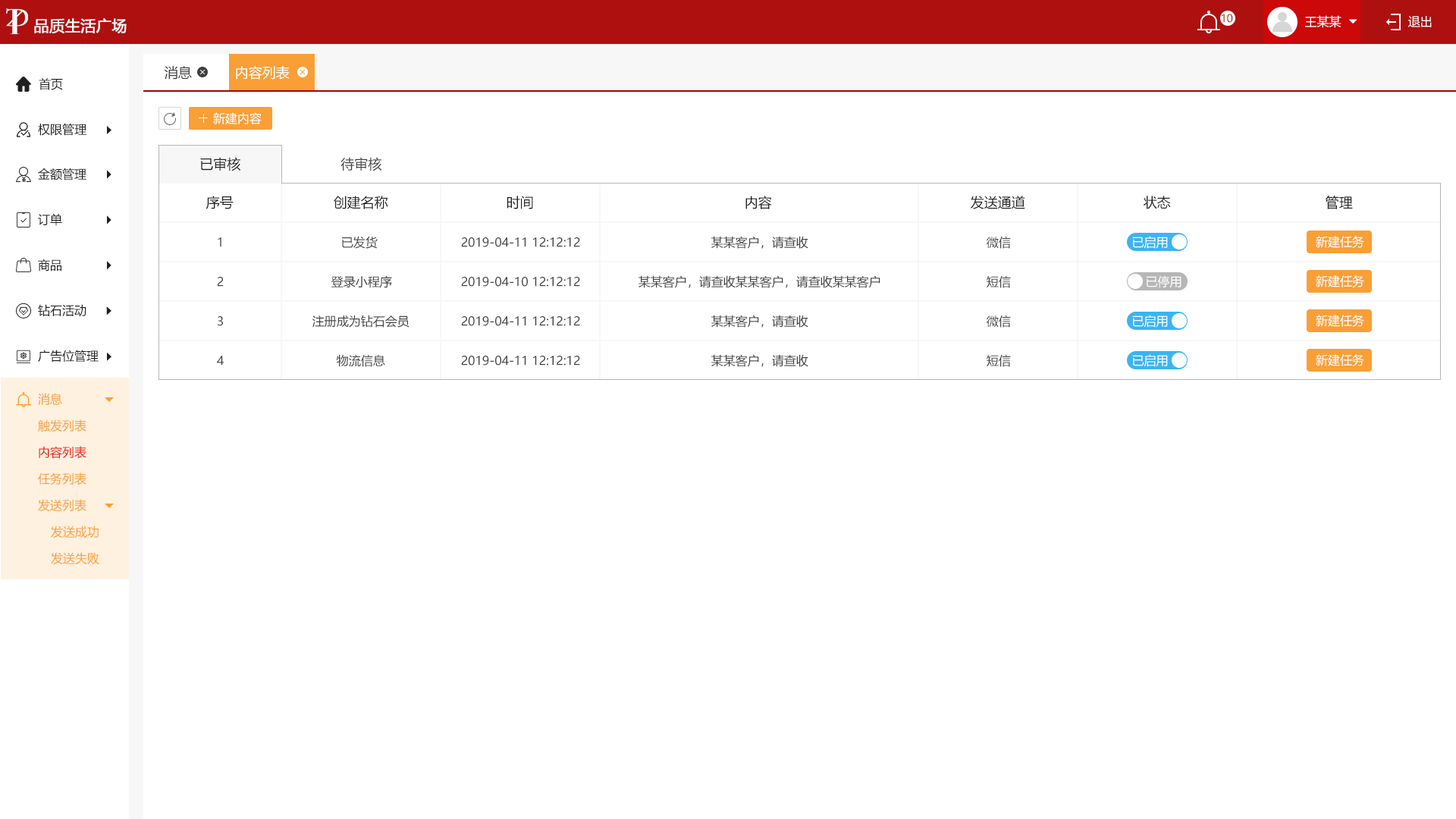
<style>
.page{position:relative;width:1456px;height:819px;background:#ffffff}
.page>*{position:absolute;margin:0}
.t1{font:10.6px "MicrosoftYaHei";color:#9c0606;text-transform:uppercase}
.t2{font:12.1px "MicrosoftYaHei";color:#ffffff;text-transform:uppercase}
.t3{font:15.2px "MicrosoftYaHei";color:#ffffff;text-transform:uppercase;font-weight:bold}
.t4{font:13.6px "MicrosoftYaHei";color:#404040;text-transform:uppercase}
.t5{font:13.6px "MicrosoftYaHei";color:#ffffff;text-transform:uppercase}
.t6{font:12.1px "MicrosoftYaHei";color:#202020;text-transform:uppercase}
.t7{font:13.6px "MicrosoftYaHei";color:#202020;text-transform:uppercase}
.t8{font:12.1px "MicrosoftYaHei";color:#404040;text-transform:uppercase}
.t9{font:12.1px "MicrosoftYaHei";color:#f99f36;text-transform:uppercase}
.t10{font:12.1px "MicrosoftYaHei";color:#e61f18;text-transform:uppercase}
</style>
<div class="page">
<p class="t1" style="left:1222px;top:14px;width:11px;height:9px">10</p>
<p class="t2" style="left:1305px;top:15px;width:36px;height:13px">王某某</p>
<p class="t2" style="left:1408px;top:16px;width:24px;height:11px">退出</p>
<p class="t3" style="left:34px;top:18px;width:93px;height:15px">品质生活广场</p>
<p class="t4" style="left:165px;top:66px;width:27px;height:14px">消息</p>
<p class="t5" style="left:236px;top:66px;width:54px;height:14px">内容列表</p>
<p class="t6" style="left:39px;top:78px;width:24px;height:12px">首页</p>
<p class="t2" style="left:213px;top:112px;width:49px;height:12px">新建内容</p>
<p class="t6" style="left:38px;top:123px;width:48px;height:13px">权限管理</p>
<p class="t7" style="left:200px;top:157px;width:41px;height:14px">已审核</p>
<p class="t4" style="left:340px;top:157px;width:42px;height:14px">待审核</p>
<p class="t6" style="left:38px;top:168px;width:48px;height:12px">金额管理</p>
<p class="t7" style="left:206px;top:196px;width:28px;height:13px">序号</p>
<p class="t7" style="left:334px;top:196px;width:54px;height:13px">创建名称</p>
<p class="t7" style="left:507px;top:196px;width:26px;height:13px">时间</p>
<p class="t7" style="left:745px;top:196px;width:27px;height:13px">内容</p>
<p class="t7" style="left:971px;top:196px;width:54px;height:13px">发送通道</p>
<p class="t7" style="left:1143px;top:196px;width:28px;height:13px">状态</p>
<p class="t7" style="left:1326px;top:196px;width:27px;height:13px">管理</p>
<p class="t6" style="left:38px;top:213px;width:24px;height:13px">订单</p>
<p class="t8" style="left:218px;top:237px;width:3px;height:10px">1</p>
<p class="t8" style="left:342px;top:236px;width:36px;height:13px">已发货</p>
<p class="t8" style="left:461px;top:237px;width:119px;height:10px">2019-04-11 12:12:12</p>
<p class="t8" style="left:711px;top:236px;width:97px;height:13px">某某客户，请查收</p>
<p class="t8" style="left:987px;top:236px;width:24px;height:13px">微信</p>
<p class="t2" style="left:1132px;top:236px;width:36px;height:13px">已启用</p>
<p class="t2" style="left:1316px;top:236px;width:48px;height:12px">新建任务</p>
<p class="t6" style="left:38px;top:259px;width:23px;height:12px">商品</p>
<p class="t8" style="left:217px;top:277px;width:7px;height:10px">2</p>
<p class="t8" style="left:331px;top:275px;width:61px;height:13px">登录小程序</p>
<p class="t8" style="left:461px;top:277px;width:119px;height:10px">2019-04-10 12:12:12</p>
<p class="t8" style="left:639px;top:275px;width:241px;height:13px">某某客户，请查收某某客户，请查收某某客户</p>
<p class="t8" style="left:987px;top:275px;width:24px;height:13px">短信</p>
<p class="t2" style="left:1146px;top:275px;width:35px;height:13px">已停用</p>
<p class="t2" style="left:1316px;top:275px;width:48px;height:12px">新建任务</p>
<p class="t6" style="left:38px;top:304px;width:48px;height:12px">钻石活动</p>
<p class="t8" style="left:218px;top:316px;width:5px;height:10px">3</p>
<p class="t8" style="left:312px;top:315px;width:97px;height:13px">注册成为钻石会员</p>
<p class="t8" style="left:461px;top:316px;width:119px;height:10px">2019-04-11 12:12:12</p>
<p class="t8" style="left:711px;top:315px;width:97px;height:13px">某某客户，请查收</p>
<p class="t8" style="left:987px;top:315px;width:24px;height:13px">微信</p>
<p class="t2" style="left:1132px;top:315px;width:36px;height:13px">已启用</p>
<p class="t2" style="left:1316px;top:315px;width:48px;height:12px">新建任务</p>
<p class="t6" style="left:38px;top:350px;width:61px;height:12px">广告位管理</p>
<p class="t8" style="left:217px;top:356px;width:7px;height:10px">4</p>
<p class="t8" style="left:336px;top:354px;width:49px;height:13px">物流信息</p>
<p class="t8" style="left:461px;top:356px;width:119px;height:10px">2019-04-11 12:12:12</p>
<p class="t8" style="left:711px;top:354px;width:97px;height:13px">某某客户，请查收</p>
<p class="t8" style="left:987px;top:354px;width:24px;height:13px">短信</p>
<p class="t2" style="left:1132px;top:354px;width:36px;height:13px">已启用</p>
<p class="t2" style="left:1316px;top:354px;width:48px;height:12px">新建任务</p>
<p class="t9" style="left:38px;top:393px;width:24px;height:12px">消息</p>
<p class="t9" style="left:38px;top:419px;width:48px;height:12px">触发列表</p>
<p class="t10" style="left:39px;top:446px;width:47px;height:13px">内容列表</p>
<p class="t9" style="left:38px;top:472px;width:48px;height:13px">任务列表</p>
<p class="t9" style="left:38px;top:499px;width:48px;height:12px">发送列表</p>
<p class="t9" style="left:51px;top:526px;width:48px;height:12px">发送成功</p>
<p class="t9" style="left:51px;top:552px;width:48px;height:13px">发送失败</p>
</div>
